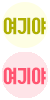
<style>
.page{position:relative;width:50px;height:100px;background:#ffffff}
.page>*{position:absolute;margin:0}
.t1{font:18px "KoreanUJSN-R";color:#afaf00}
.t2{font:18px "KoreanUJSN-R";color:#ff5571}
</style>
<div class="page">
<p class="t1" style="left:3px;top:17px;width:43px;height:18px">여기야</p>
<p class="t2" style="left:3px;top:67px;width:43px;height:18px">여기야</p>
</div>
